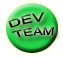
<style>
.page{position:relative;width:63px;height:58px;background:#ffffff}
.page>*{position:absolute;margin:0}
.t1{font:10px "MicrosoftSansSerif"}
</style>
<div class="page">
<p class="t1" style="left:8px;top:12px;width:46px;height:26px">DEV <br>TEAM</p>
</div>
